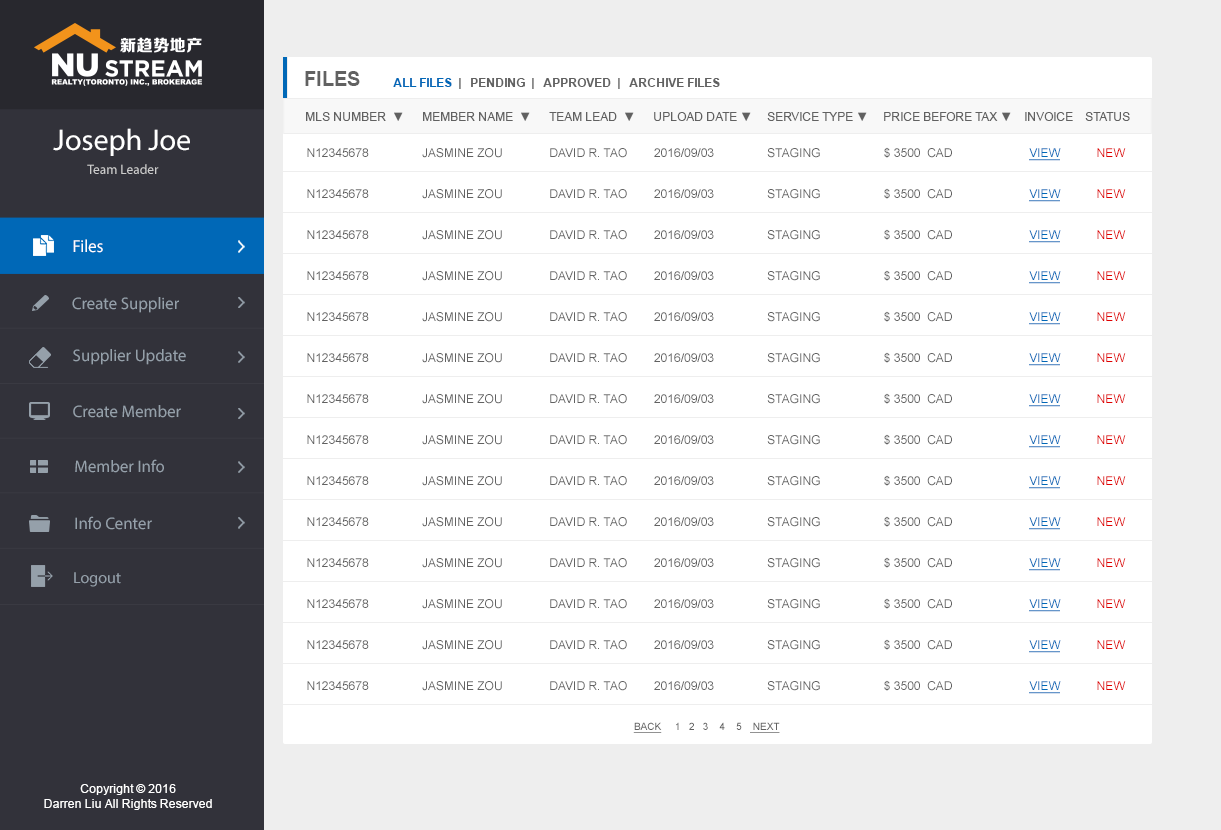
<style>
.page{position:relative;width:1221px;height:830px;background:#ffffff}
.page>*{position:absolute;margin:0}
.t1{font:20px "Arial-BoldMT";color:#616161}
.t2{font:12px "Arial-BoldMT";color:#616161;text-transform:uppercase}
.t3{font:12px "Arial-BoldMT";color:#0068b7;text-transform:uppercase}
.t4{font:12px "ArialMT";color:#616161;text-transform:uppercase}
.t5{font:30px "MyriadPro-Regular";color:#ffffff}
.t6{font:12px "ArialMT";color:#0068b7;text-transform:uppercase;text-decoration:underline}
.t7{font:12px "ArialMT";color:#df0000;text-transform:uppercase}
.t8{font:13.4px "MyriadPro-Regular";color:#cccccc}
.t9{font:17.6px "MyriadPro-Regular";color:#ffffff;scale:0.96 1}
.t10{font:16.8px "MyriadPro-Regular";color:#95a0aa}
.t11{font:16px "MyriadPro-Regular";color:#95a0aa}
.t12{font:10px "ArialMT";color:#616161;text-transform:uppercase}
.t13{font:10px "ArialMT";color:#616161;text-transform:uppercase;text-decoration:underline}
.t14{font:12px "ArialMT";color:#ffffff}
</style>
<div class="page">
<p class="t1" style="left:305px;top:71px;width:55px;height:15px">FILES</p>
<p class="t2" style="left:393px;top:78px;width:327px;height:11px"><span class="t3">all files</span>  |   pending  |   approved  |   archive files</p>
<p class="t4" style="left:306px;top:112px;width:824px;height:9px">MLS Number  ▼      Member Name  ▼      Team Lead  ▼      Upload Date ▼     Service Type ▼     Price Before Tax ▼    invoice    STATUS</p>
<p class="t5" style="left:53px;top:128px;width:137px;height:28px">Joseph Joe</p>
<p class="t4" style="left:307px;top:147px;width:819px;height:14px">N12345678                Jasmine Zou              David R. Tao        2016/09/03                Staging                   $ 3500  CAD                       <span class="t6">VIEW           </span><span class="t7">NEW</span></p>
<p class="t8" style="left:87px;top:164px;width:72px;height:10px">Team Leader</p>
<p class="t4" style="left:307px;top:188px;width:819px;height:14px">N12345678                Jasmine Zou              David R. Tao        2016/09/03                Staging                   $ 3500  CAD                       <span class="t6">VIEW           </span><span class="t7">NEW</span></p>
<p class="t4" style="left:307px;top:229px;width:819px;height:14px">N12345678                Jasmine Zou              David R. Tao        2016/09/03                Staging                   $ 3500  CAD                       <span class="t6">VIEW           </span><span class="t7">NEW</span></p>
<p class="t9" style="left:73px;top:239px;width:30px;height:14px">Files</p>
<p class="t4" style="left:307px;top:270px;width:819px;height:14px">N12345678                Jasmine Zou              David R. Tao        2016/09/03                Staging                   $ 3500  CAD                       <span class="t6">VIEW           </span><span class="t7">NEW</span></p>
<p class="t10" style="left:72px;top:297px;width:107px;height:16px">Create Supplier</p>
<p class="t4" style="left:307px;top:311px;width:819px;height:14px">N12345678                Jasmine Zou              David R. Tao        2016/09/03                Staging                   $ 3500  CAD                       <span class="t6">VIEW           </span><span class="t7">NEW</span></p>
<p class="t10" style="left:73px;top:349px;width:113px;height:16px">Supplier Update</p>
<p class="t4" style="left:307px;top:352px;width:819px;height:14px">N12345678                Jasmine Zou              David R. Tao        2016/09/03                Staging                   $ 3500  CAD                       <span class="t6">VIEW           </span><span class="t7">NEW</span></p>
<p class="t4" style="left:307px;top:393px;width:819px;height:14px">N12345678                Jasmine Zou              David R. Tao        2016/09/03                Staging                   $ 3500  CAD                       <span class="t6">VIEW           </span><span class="t7">NEW</span></p>
<p class="t10" style="left:73px;top:405px;width:108px;height:13px">Create Member</p>
<p class="t4" style="left:307px;top:434px;width:819px;height:14px">N12345678                Jasmine Zou              David R. Tao        2016/09/03                Staging                   $ 3500  CAD                       <span class="t6">VIEW           </span><span class="t7">NEW</span></p>
<p class="t10" style="left:75px;top:459px;width:89px;height:14px">Member Info</p>
<p class="t4" style="left:307px;top:475px;width:819px;height:14px">N12345678                Jasmine Zou              David R. Tao        2016/09/03                Staging                   $ 3500  CAD                       <span class="t6">VIEW           </span><span class="t7">NEW</span></p>
<p class="t10" style="left:75px;top:516px;width:77px;height:14px">Info Center</p>
<p class="t4" style="left:307px;top:516px;width:819px;height:14px">N12345678                Jasmine Zou              David R. Tao        2016/09/03                Staging                   $ 3500  CAD                       <span class="t6">VIEW           </span><span class="t7">NEW</span></p>
<p class="t4" style="left:307px;top:557px;width:819px;height:14px">N12345678                Jasmine Zou              David R. Tao        2016/09/03                Staging                   $ 3500  CAD                       <span class="t6">VIEW           </span><span class="t7">NEW</span></p>
<p class="t11" style="left:74px;top:572px;width:47px;height:15px">Logout</p>
<p class="t4" style="left:307px;top:598px;width:819px;height:14px">N12345678                Jasmine Zou              David R. Tao        2016/09/03                Staging                   $ 3500  CAD                       <span class="t6">VIEW           </span><span class="t7">NEW</span></p>
<p class="t4" style="left:307px;top:639px;width:819px;height:14px">N12345678                Jasmine Zou              David R. Tao        2016/09/03                Staging                   $ 3500  CAD                       <span class="t6">VIEW           </span><span class="t7">NEW</span></p>
<p class="t4" style="left:307px;top:680px;width:819px;height:14px">N12345678                Jasmine Zou              David R. Tao        2016/09/03                Staging                   $ 3500  CAD                       <span class="t6">VIEW           </span><span class="t7">NEW</span></p>
<p class="t12" style="left:633px;top:722px;width:147px;height:11px"><span class="t13">back</span>     1   2   3    4    5   <span class="t13"> next</span></p>
<p class="t14" style="left:44px;top:784px;width:168px;height:26px;text-align:center">Copyright © 2016<br>Darren Liu All Rights Reserved</p>
</div>
